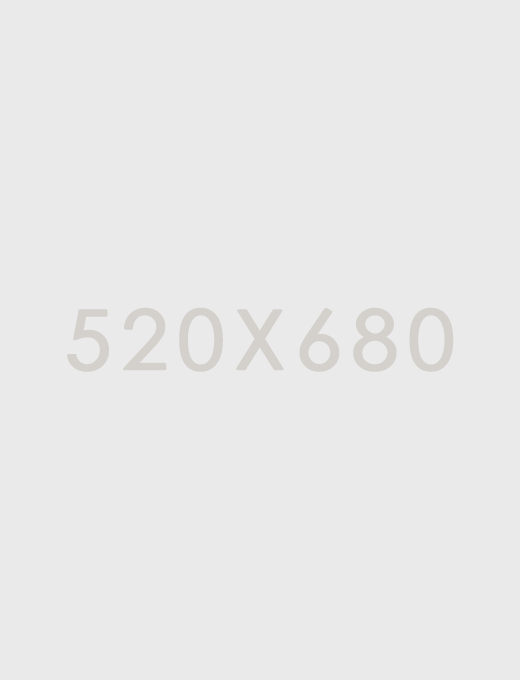
<style>
.page{position:relative;width:520px;height:680px;background:#eaeaea}
.page>*{position:absolute;margin:0}
.t1{font:82.2px "STXihei";letter-spacing:0.1em;color:#d4d1cd;font-weight:bold}
</style>
<div class="page">
<p class="t1" style="left:67px;top:307px;width:387px;height:65px">520X680</p>
</div>
